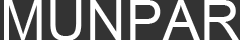
<style>
.page{position:relative;width:240px;height:40px;background:#333333}
.page>*{position:absolute;margin:0}
.t1{font:56.1px "ArialMT";color:#ffffff}
</style>
<div class="page">
<p class="t1" style="left:4px;top:0px;width:235px;height:41px">MUNPAR</p>
</div>
